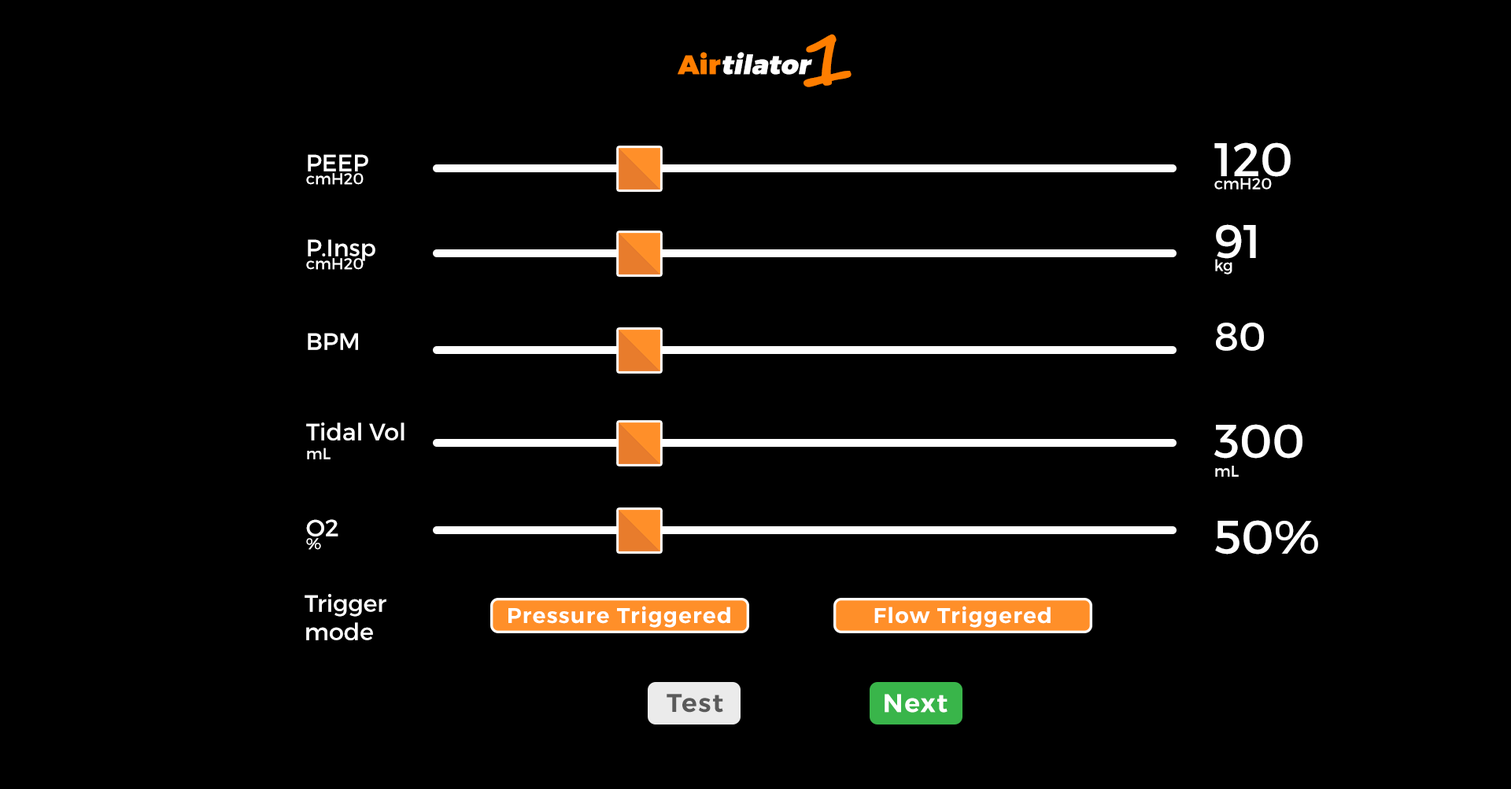
<style>
.page{position:relative;width:1511px;height:789px;background:#000000}
.page>*{position:absolute;margin:0}
.t1{font:76.7px "SegoePrint-Bold";color:#ff7e00}
.t2{font:26.8px "Montserrat-Black";color:#ffffff;font-style:italic}
.t3{font:26.8px "Montserrat-Black";color:#ff7e00}
.t4{font:15.7px/13.1px "Montserrat-Regular";color:#ffffff}
.t5{font:47.2px/13.1px "Montserrat-Regular";color:#ffffff}
.t6{font:23.6px/13.1px "Montserrat-Regular";color:#ffffff}
.t7{font:39.3px "Montserrat-Regular";color:#ffffff}
.t8{font:23.6px "Montserrat-Regular";color:#ffffff}
.t9{font:15.7px "Montserrat-Regular";color:#ffffff}
.t10{font:47.2px "Montserrat-Regular";color:#ffffff}
.t11{font:21.5px "Montserrat-SemiBold";letter-spacing:0.05em;color:#ffffff}
.t12{font:25.5px "Montserrat-SemiBold";letter-spacing:0.05em;color:#5a5a5a}
.t13{font:25.5px "Montserrat-SemiBold";letter-spacing:0.05em;color:#ffffff}
</style>
<div class="page">
<p class="t1" style="left:803px;top:34px;width:48px;height:53px">1</p>
<p class="t2" style="left:678px;top:52px;width:134px;height:23px"><span class="t3">Air</span>tilator</p>
<p class="t4" style="left:1214px;top:142px;width:77px;height:48px"><span class="t5">120<br></span>cmH20</p>
<p class="t4" style="left:306px;top:154px;width:62px;height:31px"><span class="t6">PEEP<br></span>cmH20</p>
<p class="t5" style="left:1215px;top:224px;width:41px;height:51px">91<br><span class="t4">kg</span></p>
<p class="t6" style="left:306px;top:239px;width:69px;height:31px">P.Insp<br><span class="t4">cmH20</span></p>
<p class="t7" style="left:1216px;top:323px;width:48px;height:28px">80</p>
<p class="t8" style="left:308px;top:333px;width:50px;height:17px">BPM</p>
<p class="t6" style="left:306px;top:423px;width:98px;height:37px">Tidal Vol<br><span class="t9">mL</span></p>
<p class="t5" style="left:1214px;top:424px;width:88px;height:53px">300<br><span class="t9">mL</span></p>
<p class="t6" style="left:306px;top:519px;width:32px;height:31px">O2<br><span class="t4">%</span></p>
<p class="t10" style="left:1215px;top:520px;width:103px;height:35px">50%</p>
<p class="t8" style="left:305px;top:594px;width:81px;height:47px">Trigger<br>mode</p>
<p class="t11" style="left:508px;top:606px;width:222px;height:22px">Pressure Triggered</p>
<p class="t11" style="left:874px;top:606px;width:177px;height:22px">Flow Triggered</p>
<p class="t12" style="left:666px;top:694px;width:57px;height:19px">Test</p>
<p class="t13" style="left:884px;top:694px;width:63px;height:19px">Next</p>
</div>
